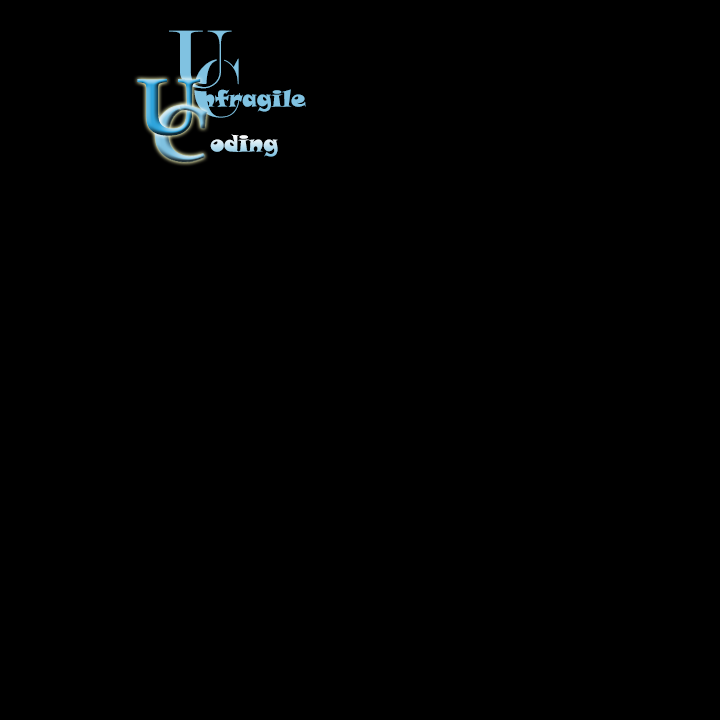
<style>
.page{position:relative;width:720px;height:720px;background:#000000}
.page>*{position:absolute;margin:0}
.t1{font:80px "CalisMTBol"}
.t2{font:23px "SnapITC-Regular";color:#80c2e1}
.t3{font:23px "SnapITC-Regular"}
</style>
<div class="page">
<p class="t1" style="left:137px;top:79px;width:64px;height:57px">U</p>
<p class="t2" style="left:200px;top:89px;width:106px;height:23px">nfragile</p>
<p class="t3" style="left:210px;top:134px;width:68px;height:23px">oding</p>
</div>
